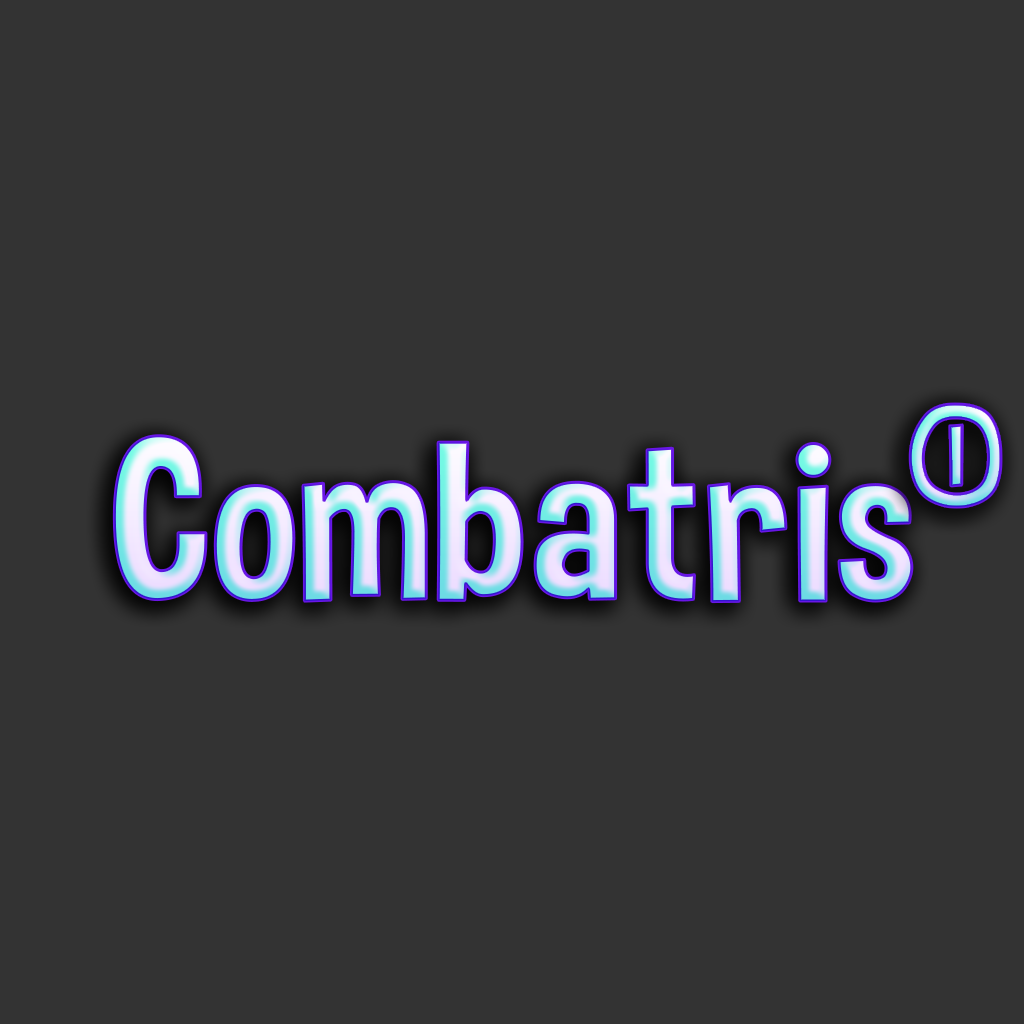
<style>
.page{position:relative;width:1024px;height:1024px;background:#333333}
.page>*{position:absolute;margin:0}
.t1{font:229.2px "DimboRegular";letter-spacing:0.02em}
</style>
<div class="page">
<p class="t1" style="left:114px;top:435px;width:798px;height:167px">Combatris</p>
</div>
